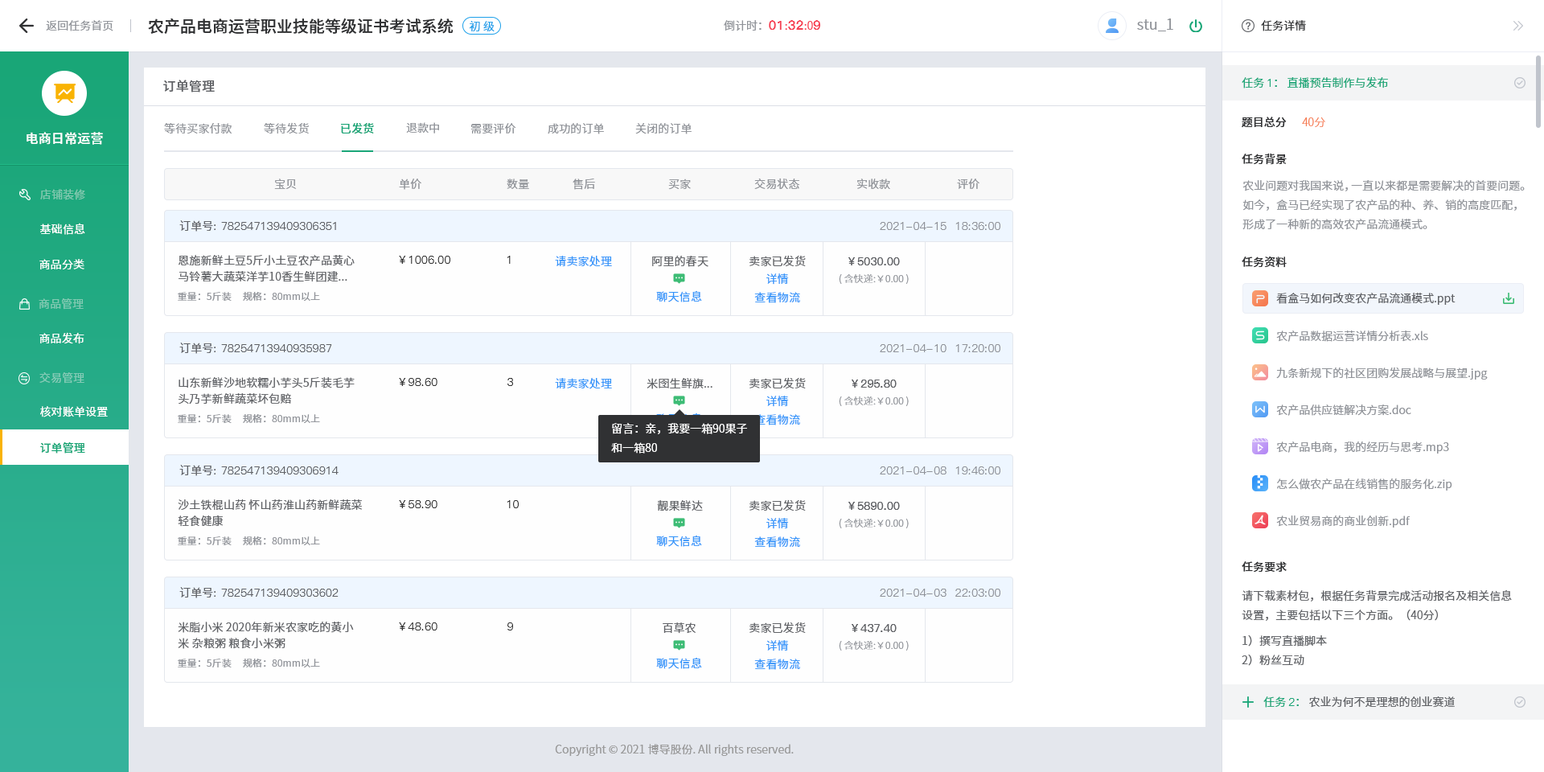
<style>
.page{position:relative;width:1544px;height:772px;background:#ffffff}
.page>*{position:absolute;margin:0}
.t1{font:16.1px "SourceHanSansCN-Medium";color:#303133}
.t2{font:11.3px "SourceHanSansCN-Normal";color:#909399}
.t3{font:11.3px "SourceHanSansCN-Normal";color:#1da0ea}
.t4{font:12.9px "PingFang-SC-Heavy";color:#f63f52}
.t5{font:11.3px "SourceHanSansCN-Normal";color:#f63f52}
.t6{font:14.5px "SourceHanSansCN-Normal";color:#909399}
.t7{font:11.3px "SourceHanSansCN-Normal";color:#303133}
.t8{font:11.3px "SourceHanSansCN-Normal";color:#19a677}
.t9{font:11.3px "PingFang-SC-Medium";color:#19a677}
.t10{font:12.9px "SourceHanSansCN-Medium";letter-spacing:0.01em;color:#606266}
.t11{font:11.3px "SourceHanSansCN-Normal";letter-spacing:0.01em;color:#909399}
.t12{font:11.3px "SourceHanSansCN-Medium";letter-spacing:0.01em;color:#1aa678}
.t13{font:11.3px "SourceHanSansCN-Medium";color:#303133}
.t14{font:11.3px "SourceHanSansCN-Light";color:#f67d53}
.t15{font:12.9px "SourceHanSansCN-Medium";letter-spacing:0.01em;color:#ffffff}
.t16{font:11.3px/19.3px "SourceHanSansCN-Normal";color:#909399}
.t17{font:11.3px "SourceHanSansCN-Regular";letter-spacing:0.01em;color:#81c9b0}
.t18{font:11.3px "PingFang-SC-Medium";letter-spacing:0.01em;color:#606266}
.t19{font:11.3px "SourceHanSansCN-Normal";letter-spacing:0.01em;color:#606266}
.t20{font:11.3px "PingFang-SC-Medium";letter-spacing:0.01em;color:#909399}
.t21{font:11.3px "SourceHanSansCN-Normal";letter-spacing:0.01em;color:#ffffff}
.t22{font:11.3px/16.1px "SourceHanSansCN-Normal";letter-spacing:0.01em;color:#606266}
.t23{font:11.3px "PingFang-SC-Medium";letter-spacing:0.01em;color:#333333}
.t24{font:11.3px "SourceHanSansCN-Normal";letter-spacing:0.01em;color:#3395fa}
.t25{font:11.3px "PingFang-SC-Bold";letter-spacing:0.01em;color:#606266}
.t26{font:9.7px "SourceHanSansCN-Light";letter-spacing:0.01em;color:#909399}
.t27{font:9.7px "SourceHanSansCN-Normal";letter-spacing:0.01em;color:#909399}
.t28{font:11.3px "SourceHanSansCN-Normal";color:#606266}
.t29{font:11.3px "SourceHanSansCN-Regular";letter-spacing:0.01em;color:#82cab3}
.t30{font:11.3px "SourceHanSansCN-Regular";letter-spacing:0.01em;color:#ffffff}
.t31{font:11.3px "SourceHanSansCN-Regular";letter-spacing:0.01em;color:#83cbb6}
.t32{font:11.3px/19.3px "SourceHanSansCN-Normal";color:#ffffff}
.t33{font:11.3px "SourceHanSansCN-Medium";letter-spacing:0.01em;color:#19a677}
.t34{font:11.3px/19.3px "SourceHanSansCN-Normal";color:#606266}
.t35{font:11.3px "PingFang-SC-Medium";color:#1aa678}
.t36{font:11.3px "SourceHanSansCN-Normal";color:#1aa678}
.t37{font:11.3px "SourceHanSansCN-Normal";color:#999999}
</style>
<div class="page">
<p class="t1" style="left:148px;top:18px;width:306px;height:16px">农产品电商运营职业技能等级证书考试系统</p>
<p class="t2" style="left:46px;top:20px;width:67px;height:11px">返回任务首页</p>
<p class="t3" style="left:469px;top:21px;width:26px;height:11px">初 级</p>
<p class="t2" style="left:724px;top:20px;width:96px;height:11px">倒计时：<span class="t4">01</span><span class="t5">:</span><span class="t4">32</span><span class="t5">:0</span><span class="t4">9</span></p>
<p class="t6" style="left:1137px;top:18px;width:37px;height:13px">stu_1</p>
<p class="t7" style="left:1261px;top:20px;width:45px;height:11px">任务详情</p>
<p class="t8" style="left:1242px;top:76px;width:146px;height:12px">任务 <span class="t9">1</span>： 直播预告制作与发布</p>
<p class="t10" style="left:163px;top:80px;width:52px;height:12px">订单管理</p>
<p class="t11" style="left:164px;top:123px;width:68px;height:11px">等待买家付款</p>
<p class="t11" style="left:264px;top:122px;width:45px;height:12px">等待发货</p>
<p class="t12" style="left:341px;top:122px;width:33px;height:12px">已发货</p>
<p class="t11" style="left:406px;top:122px;width:33px;height:12px">退款中</p>
<p class="t11" style="left:471px;top:123px;width:45px;height:11px">需要评价</p>
<p class="t11" style="left:548px;top:123px;width:56px;height:11px">成功的订单</p>
<p class="t11" style="left:635px;top:123px;width:57px;height:11px">关闭的订单</p>
<p class="t13" style="left:1242px;top:117px;width:45px;height:11px">题目总分</p>
<p class="t14" style="left:1302px;top:117px;width:24px;height:10px">40分</p>
<p class="t15" style="left:27px;top:132px;width:76px;height:13px">电商日常运营</p>
<p class="t13" style="left:1242px;top:153px;width:45px;height:12px">任务背景</p>
<p class="t11" style="left:274px;top:179px;width:23px;height:10px">宝贝</p>
<p class="t11" style="left:399px;top:179px;width:22px;height:11px">单价</p>
<p class="t11" style="left:507px;top:179px;width:22px;height:10px">数量</p>
<p class="t11" style="left:573px;top:179px;width:22px;height:11px">售后</p>
<p class="t11" style="left:668px;top:179px;width:23px;height:11px">买家</p>
<p class="t11" style="left:754px;top:178px;width:46px;height:11px">交易状态</p>
<p class="t11" style="left:857px;top:179px;width:33px;height:10px">实收款</p>
<p class="t11" style="left:957px;top:179px;width:23px;height:10px">评价</p>
<p class="t16" style="left:1243px;top:180px;width:282px;height:50px">农业问题对我国来说，一直以来都是需要解决的首要问题。如今，盒马已经实现了农产品的种、养、销的高度匹配，形成了一种新的高效农产品流通模式。</p>
<p class="t17" style="left:40px;top:189px;width:45px;height:11px">店铺装修</p>
<p class="t18" style="left:179px;top:220px;width:157px;height:12px"><span class="t19">订单号</span>: 782547139409306351</p>
<p class="t20" style="left:880px;top:222px;width:121px;height:8px">2021-04-15  18:36:00</p>
<p class="t21" style="left:40px;top:223px;width:45px;height:12px">基础信息</p>
<p class="t22" style="left:179px;top:255px;width:176px;height:27px">恩施新鲜土豆5斤小土豆农产品黄心马铃薯大蔬菜洋芋10香生鲜团建...</p>
<p class="t23" style="left:399px;top:256px;width:51px;height:8px">￥1006.00</p>
<p class="t23" style="left:507px;top:256px;width:4px;height:8px">1</p>
<p class="t24" style="left:555px;top:256px;width:57px;height:11px">请卖家处理</p>
<p class="t19" style="left:652px;top:256px;width:57px;height:11px">阿里的春天</p>
<p class="t19" style="left:750px;top:255px;width:56px;height:11px">卖家已发货</p>
<p class="t25" style="left:849px;top:257px;width:51px;height:8px">￥5030.00</p>
<p class="t13" style="left:1242px;top:256px;width:45px;height:12px">任务资料</p>
<p class="t21" style="left:39px;top:259px;width:45px;height:10px">商品分类</p>
<p class="t24" style="left:767px;top:273px;width:22px;height:12px">详情</p>
<p class="t26" style="left:839px;top:274px;width:70px;height:10px">( 含快递:￥0.00 )</p>
<p class="t27" style="left:178px;top:292px;width:142px;height:9px">重量：5斤装     规格：80mm以上</p>
<p class="t24" style="left:656px;top:290px;width:46px;height:12px">聊天信息</p>
<p class="t24" style="left:754px;top:292px;width:46px;height:11px">查看物流</p>
<p class="t28" style="left:1276px;top:293px;width:180px;height:12px">看盒马如何改变农产品流通模式.ppt</p>
<p class="t29" style="left:39px;top:298px;width:45px;height:12px">商品管理</p>
<p class="t30" style="left:39px;top:332px;width:45px;height:12px">商品发布</p>
<p class="t2" style="left:1276px;top:331px;width:152px;height:11px">农产品数据运营详情分析表.xls</p>
<p class="t18" style="left:179px;top:343px;width:153px;height:11px"><span class="t19">订单号</span>: 78254713940935987</p>
<p class="t20" style="left:880px;top:344px;width:121px;height:8px">2021-04-10  17:20:00</p>
<p class="t31" style="left:39px;top:372px;width:45px;height:12px">交易管理</p>
<p class="t22" style="left:179px;top:377px;width:176px;height:28px">山东新鲜沙地软糯小芋头5斤装毛芋头乃芋新鲜蔬菜坏包赔</p>
<p class="t19" style="left:750px;top:377px;width:56px;height:11px">卖家已发货</p>
<p class="t2" style="left:1276px;top:367px;width:212px;height:13px">九条新规下的社区团购发展战略与展望.jpg</p>
<p class="t23" style="left:399px;top:378px;width:39px;height:8px">￥98.60</p>
<p class="t23" style="left:508px;top:378px;width:5px;height:8px">3</p>
<p class="t24" style="left:555px;top:378px;width:57px;height:11px">请卖家处理</p>
<p class="t19" style="left:647px;top:378px;width:66px;height:11px">米囹生鲜旗...</p>
<p class="t25" style="left:852px;top:380px;width:45px;height:8px">￥295.80</p>
<p class="t24" style="left:767px;top:396px;width:22px;height:11px">详情</p>
<p class="t26" style="left:839px;top:397px;width:70px;height:9px">( 含快递:￥0.00 )</p>
<p class="t21" style="left:40px;top:406px;width:68px;height:11px">核对账单设置</p>
<p class="t2" style="left:1276px;top:405px;width:136px;height:11px">农产品供应链解决方案.doc</p>
<p class="t27" style="left:178px;top:414px;width:142px;height:9px">重量：5斤装     规格：80mm以上</p>
<p class="t32" style="left:611px;top:423px;width:136px;height:31px">留言：亲，我要一箱90果子<br>和一箱80</p>
<p class="t24" style="left:754px;top:414px;width:46px;height:11px">查看物流</p>
<p class="t33" style="left:40px;top:442px;width:45px;height:12px">订单管理</p>
<p class="t2" style="left:1276px;top:442px;width:173px;height:12px">农产品电商，我的经历与思考.mp3</p>
<p class="t18" style="left:179px;top:465px;width:160px;height:11px"><span class="t19">订单号</span>: 782547139409306914</p>
<p class="t20" style="left:880px;top:467px;width:121px;height:8px">2021-04-08  19:46:00</p>
<p class="t2" style="left:1277px;top:479px;width:176px;height:12px">怎么做农产品在线销售的服务化.zip</p>
<p class="t22" style="left:178px;top:499px;width:185px;height:28px">沙土铁棍山药 怀山药淮山药新鲜蔬菜轻食健康</p>
<p class="t23" style="left:399px;top:500px;width:39px;height:8px">￥58.90</p>
<p class="t23" style="left:507px;top:500px;width:12px;height:8px">10</p>
<p class="t19" style="left:657px;top:500px;width:46px;height:12px">靓果鲜达</p>
<p class="t19" style="left:750px;top:499px;width:56px;height:12px">卖家已发货</p>
<p class="t25" style="left:849px;top:502px;width:51px;height:8px">￥5890.00</p>
<p class="t24" style="left:767px;top:518px;width:22px;height:11px">详情</p>
<p class="t26" style="left:839px;top:519px;width:70px;height:9px">( 含快递:￥0.00 )</p>
<p class="t2" style="left:1276px;top:516px;width:135px;height:12px">农业贸易商的商业创新.pdf</p>
<p class="t27" style="left:178px;top:536px;width:142px;height:9px">重量：5斤装     规格：80mm以上</p>
<p class="t24" style="left:656px;top:535px;width:46px;height:12px">聊天信息</p>
<p class="t24" style="left:754px;top:536px;width:46px;height:12px">查看物流</p>
<p class="t13" style="left:1242px;top:561px;width:45px;height:12px">任务要求</p>
<p class="t18" style="left:179px;top:587px;width:160px;height:11px"><span class="t19">订单号</span>: 782547139409303602</p>
<p class="t20" style="left:880px;top:589px;width:121px;height:8px">2021-04-03  22:03:00</p>
<p class="t34" style="left:1242px;top:590px;width:270px;height:76px">请下载素材包，根据任务背景完成活动报名及相关信息设置，主要包括以下三个方面。（40分）<br>1）撰写直播脚本<br>2）粉丝互动</p>
<p class="t22" style="left:178px;top:622px;width:176px;height:27px">米脂小米 2020年新米农家吃的黄小米 杂粮粥 粮食小米粥</p>
<p class="t23" style="left:399px;top:623px;width:39px;height:8px">￥48.60</p>
<p class="t23" style="left:508px;top:623px;width:5px;height:8px">9</p>
<p class="t19" style="left:663px;top:623px;width:34px;height:11px">百草农</p>
<p class="t19" style="left:750px;top:622px;width:56px;height:11px">卖家已发货</p>
<p class="t25" style="left:852px;top:624px;width:45px;height:8px">￥437.40</p>
<p class="t24" style="left:767px;top:640px;width:22px;height:12px">详情</p>
<p class="t26" style="left:839px;top:641px;width:70px;height:10px">( 含快递:￥0.00 )</p>
<p class="t27" style="left:178px;top:659px;width:142px;height:9px">重量：5斤装     规格：80mm以上</p>
<p class="t24" style="left:656px;top:657px;width:46px;height:12px">聊天信息</p>
<p class="t24" style="left:754px;top:659px;width:46px;height:11px">查看物流</p>
<p class="t28" style="left:1264px;top:697px;width:191px;height:11px"><span class="t8">任务 </span><span class="t35">2</span><span class="t36">：</span> 农业为何不是理想的创业赛道</p>
<p class="t37" style="left:555px;top:744px;width:239px;height:12px">Copyright © 2021 博导股份. All rights reserved.</p>
</div>
